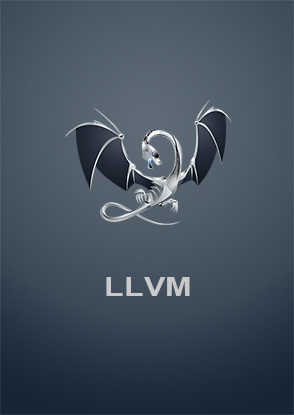
<style>
.page{position:relative;width:294px;height:415px}
.page>*{position:absolute;margin:0}
.t1{font:25.6px "Arial-BoldMT";color:#c9c9c9;scale:1.25 1}
</style>
<div class="page">
<p class="t1" style="left:106px;top:277px;width:84px;height:19px">LLVM</p>
</div>
